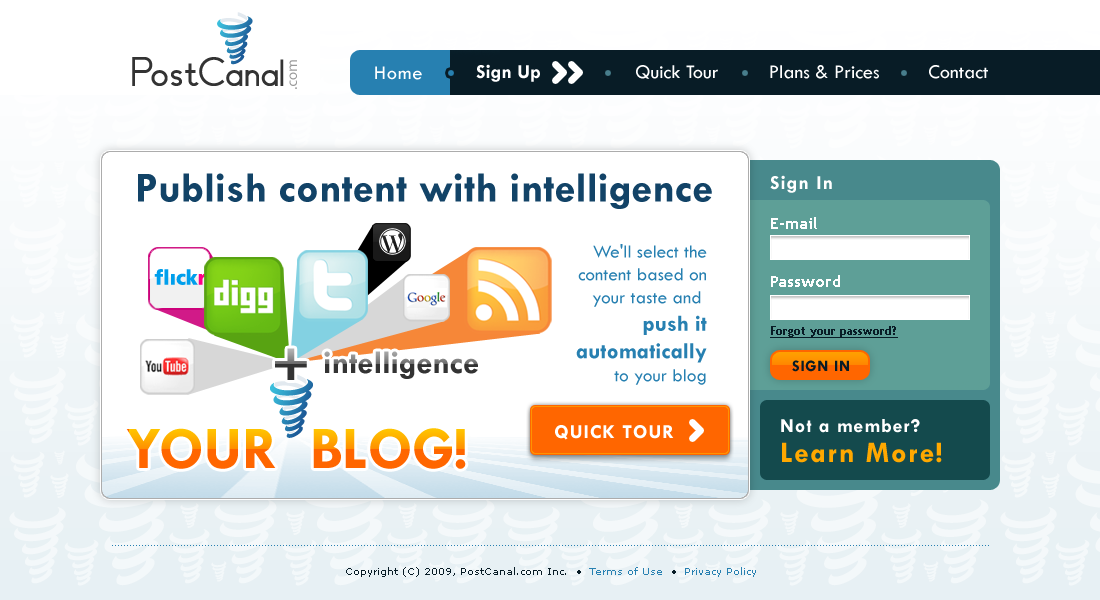
<style>
.page{position:relative;width:1100px;height:600px;background:#ffffff}
.page>*{position:absolute;margin:0}
.t1{font:20px "TwCenMT-Bold";color:#ffffff}
.t2{font:20px "TwCenMT-Regular";color:#ffffff}
.t3{font:20px "TwCenMT-Regular";letter-spacing:0.05em;color:#ffffff}
.t4{font:43px "TwCenMT-Bold";color:#124368}
.t5{font:20px "TwCenMT-Bold";letter-spacing:0.05em;color:#ffffff}
.t6{font:19px "TwCenMT-Regular";color:#2780b1}
.t7{font:23px "TwCenMT-Bold";color:#2780b1}
.t8{font:33px "TwCenMT-Bold"}
.t9{font:57px "TwCenMT-Bold";font-weight:bold}
.t10{font:16px "TwCenMT-Bold";letter-spacing:0.05em;color:#081c26;text-transform:uppercase}
.t11{font:30px/30px "TwCenMT-Bold";letter-spacing:0.05em;color:#ffa800}
.t12{font:60.7px "TwCenMT-Bold"}
.t13{font:10px "Verdana";color:#081c26}
.t14{font:10px "Verdana";color:#2780b1}
</style>
<div class="page">
<p class="t1" style="left:476px;top:64px;width:64px;height:18px">Sign Up</p>
<p class="t2" style="left:636px;top:65px;width:82px;height:14px">Quick Tour</p>
<p class="t2" style="left:770px;top:65px;width:109px;height:14px">Plans &amp; Prices</p>
<p class="t2" style="left:929px;top:65px;width:59px;height:14px">Contact</p>
<p class="t3" style="left:375px;top:66px;width:47px;height:14px">Home</p>
<p class="t4" style="left:138px;top:173px;width:574px;height:36px">Publish content with intelligence</p>
<p class="t5" style="left:770px;top:175px;width:62px;height:18px">Sign In</p>
<p class="t6" style="left:576px;top:244px;width:131px;height:141px;text-align:right">We'll select the content based on your taste and <br><span class="t7">push it automatically<br></span>to your blog</p>
<p class="t8" style="left:275px;top:348px;width:203px;height:32px"><span class="t9">+ </span>intelligence</p>
<p class="t10" style="left:792px;top:360px;width:57px;height:12px">Sign In</p>
<p class="t5" style="left:555px;top:425px;width:119px;height:15px">QUICK TOUR</p>
<p class="t5" style="left:781px;top:419px;width:161px;height:44px">Not a member?<br><span class="t11">Learn More!</span></p>
<p class="t12" style="left:126px;top:428px;width:340px;height:41px">YOUR  BLOG!</p>
<p class="t13" style="left:346px;top:567px;width:410px;height:10px">Copyright (C) 2009, PostCanal.com Inc.  • <span class="t14"> Terms of Use</span>  •  <span class="t14">Privacy Policy</span></p>
</div>
